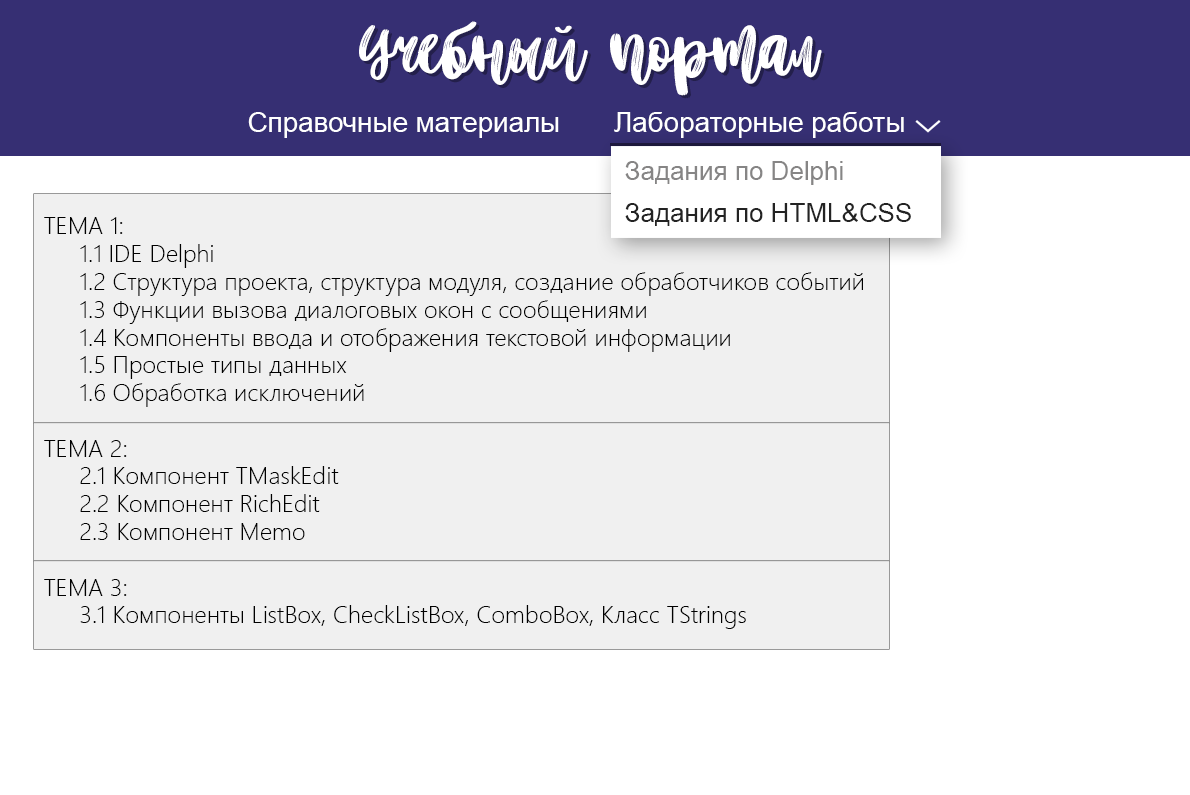
<style>
.page{position:relative;width:1190px;height:795px;background:#ffffff}
.page>*{position:absolute;margin:0}
.t1{font:83.3px "BetterTogether-Script";color:#ffffff}
.t2{font:27.8px "ArialMT";color:#ffffff}
.t3{font:26px/41.7px "ArialMT";color:#232323}
.t4{font:26px/41.7px "ArialMT";color:#868585}
.t5{font:24.3px/27.8px "SegoeUI-Light";color:#000000}
.t6{font:24.3px/27.8px "SegoeUI-Light";color:#000000;text-transform:uppercase}
</style>
<div class="page">
<p class="t1" style="left:359px;top:21px;width:463px;height:75px">Учебный портал</p>
<p class="t2" style="left:248px;top:112px;width:656px;height:26px">Справочные материалы       Лабораторные работы</p>
<p class="t3" style="left:625px;top:161px;width:286px;height:65px"><span class="t4">Задания по Delphi<br></span>Задания по HTML&amp;CSS</p>
<p class="t5" style="left:44px;top:217px;width:819px;height:412px"><span class="t6">Тема 1:<br></span> 1.1 IDE Delphi<br> 1.2 Структура проекта, структура модуля, создание обработчиков событий<br> 1.3 Функции вызова диалоговых окон с сообщениями<br> 1.4 Компоненты ввода и отображения текстовой информации<br> 1.5 Простые типы данных<br> 1.6 Обработка исключений<br><br><span class="t6">Тема 2:<br></span> 2.1 Компонент TMaskEdit<br> 2.2 Компонент RichEdit<br> 2.3 Компонент Memo<br><span class="t6"><br>Тема 3:<br></span> 3.1 Компоненты ListBox, CheckListBox, ComboBox, Класс TStrings</p>
</div>
